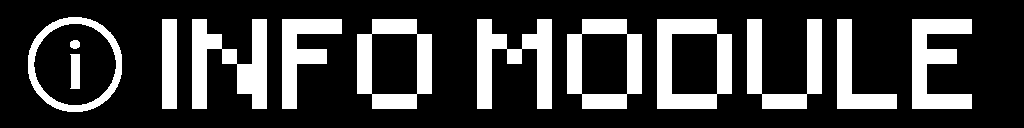
<style>
.page{position:relative;width:1024px;height:128px;background:#000000}
.page>*{position:absolute;margin:0}
.t1{font:120px "Small-Pixel";color:#ffffff}
</style>
<div class="page">
<p class="t1" style="left:162px;top:19px;width:810px;height:90px">INFO MODULE</p>
</div>
